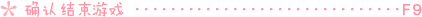
<style>
.page{position:relative;width:422px;height:17px;background:#ffffff}
.page>*{position:absolute;margin:0}
.t1{font:18px "¢è?";color:#ff93a5}
</style>
<div class="page">
<p class="t1" style="left:25px;top:1px;width:99px;height:16px">确认结束游戏</p>
</div>
